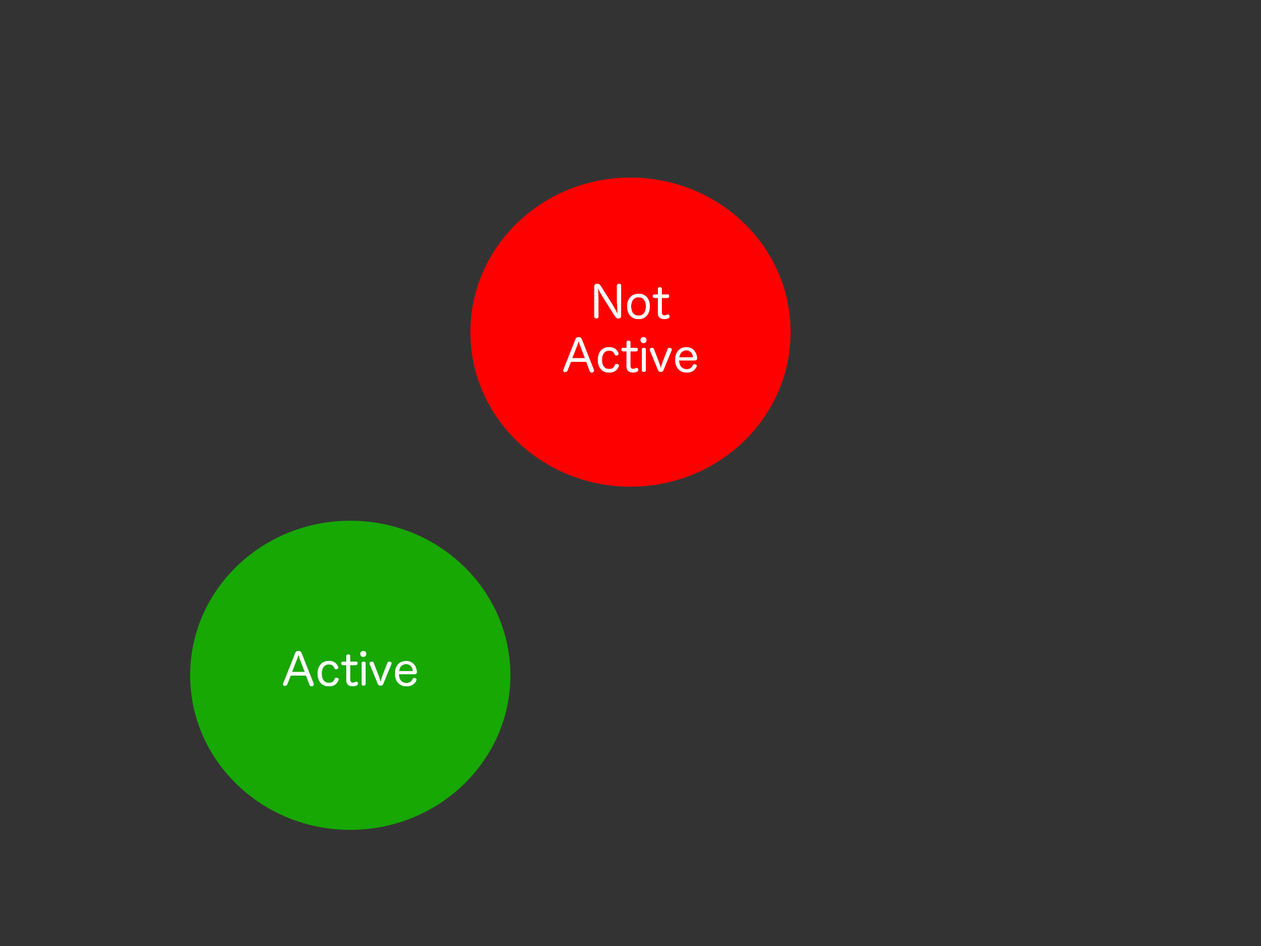
<style>
.page{position:relative;width:1261px;height:946px;background:#333333}
.page>*{position:absolute;margin:0}
.t1{font:44.5px "HiraMaruPro-W4";color:#ffffff}
</style>
<div class="page">
<p class="t1" style="left:563px;top:284px;width:134px;height:88px;text-align:center">Not Active</p>
<p class="t1" style="left:283px;top:651px;width:134px;height:35px">Active</p>
</div>
